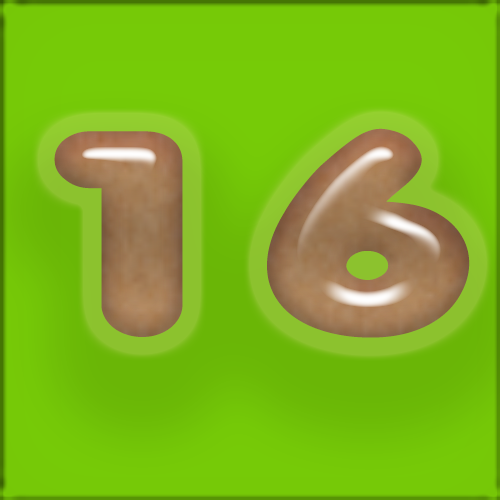
<style>
.page{position:relative;width:500px;height:500px}
.page>*{position:absolute;margin:0}
.t1{font:280px "Anja-Eliane-Nornal";letter-spacing:-0.02em;color:#9f7754;scale:1.25 1}
</style>
<div class="page">
<p class="t1" style="left:54px;top:128px;width:416px;height:210px">16</p>
</div>
